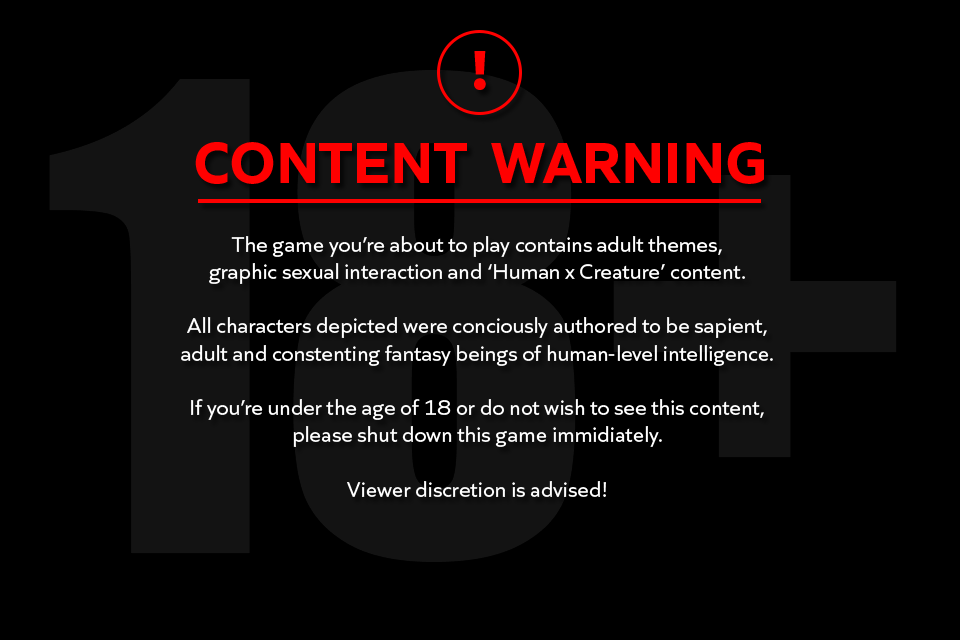
<style>
.page{position:relative;width:960px;height:640px;background:#000000}
.page>*{position:absolute;margin:0}
.t1{font:58px "QuietSans-ExtraBold";color:#ff0000}
.t2{font:60px "QuietSans-Bold";color:#ff0000}
.t3{font:22.7px "QuietSans-Regular";color:#ffffff}
</style>
<div class="page">
<p class="t1" style="left:474px;top:51px;width:12px;height:39px">!</p>
<p class="t2" style="left:195px;top:142px;width:569px;height:42px">CONTENT  WARNING</p>
<p class="t3" style="left:181px;top:236px;width:592px;height:261px;text-align:center">The game you’re about to play contains adult themes,<br>graphic sexual interaction and ‘Human x Creature’ content.<br><br>All characters depicted were conciously authored to be sapient,<br>adult and constenting fantasy beings of human-level intelligence.<br><br>If you’re under the age of 18 or do not wish to see this content, <br>please shut down this game immidiately.<br><br>Viewer discretion is advised!</p>
</div>
